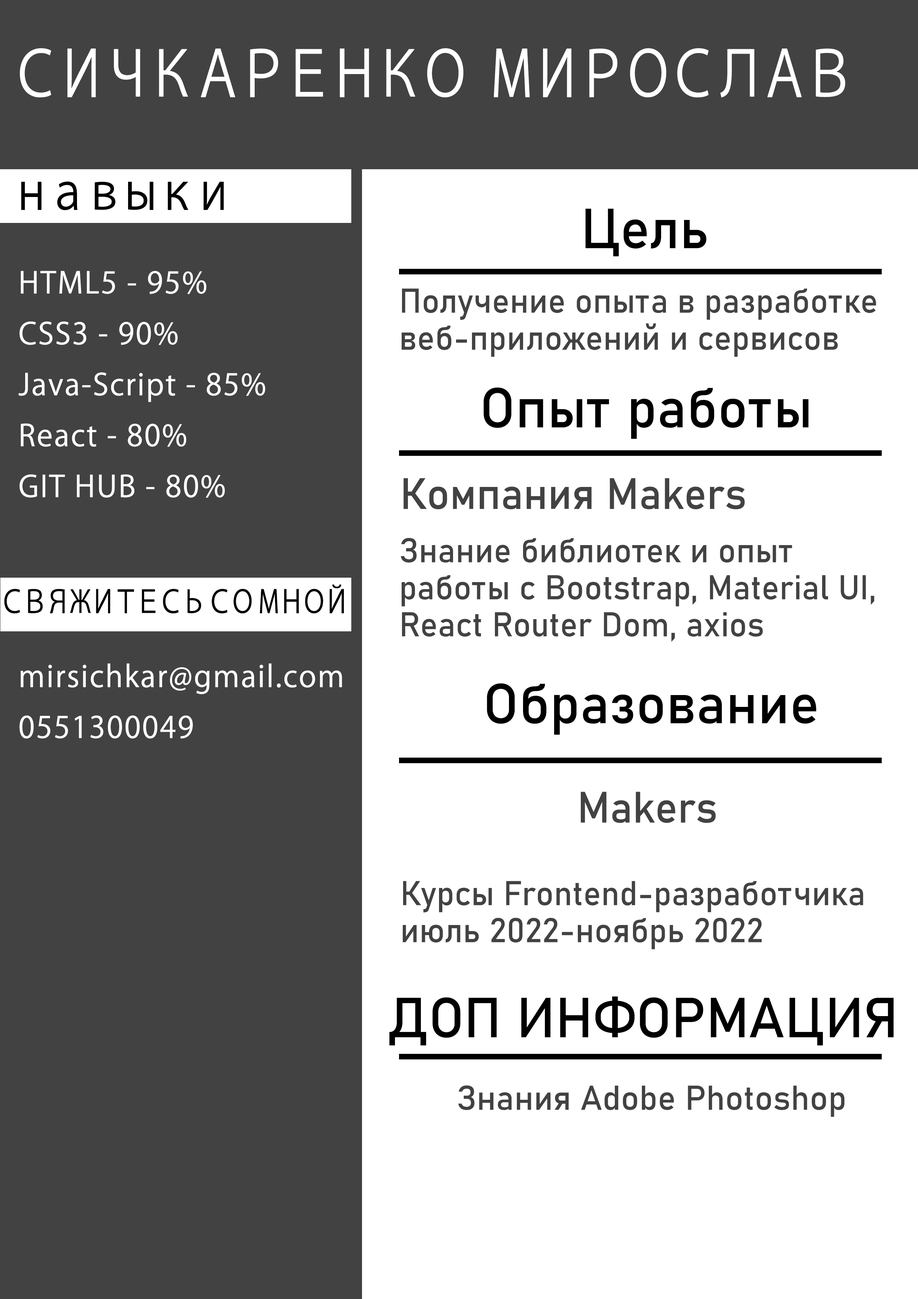
<style>
.page{position:relative;width:918px;height:1299px;background:#ffffff}
.page>*{position:absolute;margin:0}
.t1{font:61.9px "KozGoPr6N-Regular";letter-spacing:-0.12em;color:#ffffff;font-weight:bold;scale:0.81 1}
.t2{font:49.6px "KozGoPr6N-Regular";letter-spacing:-0.12em;color:#010101;font-weight:bold;scale:0.81 1}
.t3{font:55.5px "Bahnschrift";color:#000000;font-weight:bold}
.t4{font:29.3px/50.9px "KozGoPr6N-Regular";letter-spacing:0.025em;color:#ffffff;font-weight:bold}
.t5{font:33.9px/37px "Bahnschrift";color:#424242;font-weight:bold}
.t6{font:43.2px "Bahnschrift";color:#424242;font-weight:bold}
.t7{font:30.9px "KozGoPr6N-Regular";letter-spacing:-0.12em;color:#010101;font-weight:bold;scale:0.81 1}
.t8{font:33.9px "Bahnschrift";color:#424242;font-weight:bold}
</style>
<div class="page">
<p class="t1" style="left:20px;top:48px;width:826px;height:49px">СИЧКАРЕНКО   МИРОСЛАВ</p>
<p class="t2" style="left:21px;top:181px;width:203px;height:29px">навыки</p>
<p class="t3" style="left:585px;top:208px;width:122px;height:49px">Цель</p>
<p class="t4" style="left:19px;top:271px;width:246px;height:227px">HTML5 - 95%<br>CSS3 - 90%<br>Java-Script - 85%<br>React - 80%<br>GIT HUB - 80%</p>
<p class="t5" style="left:402px;top:288px;width:474px;height:69px">Получение опыта в разработке веб-приложений и сервисов</p>
<p class="t3" style="left:484px;top:387px;width:325px;height:52px">Опыт работы</p>
<p class="t6" style="left:404px;top:478px;width:341px;height:31px">Компания Makers</p>
<p class="t5" style="left:401px;top:538px;width:473px;height:104px">Знание библиотек и опыт работы с Bootstrap, Material UI,<br>React Router Dom, axios</p>
<p class="t7" style="left:4px;top:584px;width:340px;height:29px">СВЯЖИТЕСЬ СО МНОЙ</p>
<p class="t4" style="left:19px;top:663px;width:323px;height:76px">mirsichkar@gmail.com<br>0551300049</p>
<p class="t3" style="left:487px;top:683px;width:329px;height:52px">Образование</p>
<p class="t6" style="left:581px;top:792px;width:135px;height:31px">Makers</p>
<p class="t5" style="left:403px;top:881px;width:460px;height:68px">Курсы Frontend-разработчика<br>июль 2022-ноябрь 2022</p>
<p class="t3" style="left:389px;top:996px;width:505px;height:50px">ДОП ИНФОРМАЦИЯ</p>
<p class="t8" style="left:458px;top:1085px;width:387px;height:32px">Знания Adobe Photoshop</p>
</div>
